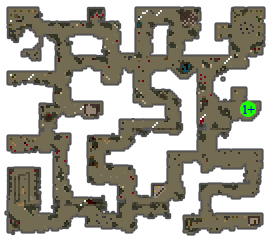
<style>
.page{position:relative;width:275px;height:242px;background:#ffffff}
.page>*{position:absolute;margin:0}
.t1{font:20px "TimesNewRomanPSMT";color:#0101dd}
</style>
<div class="page">
<p class="t1" style="left:243px;top:105px;width:12px;height:9px">1+</p>
</div>
